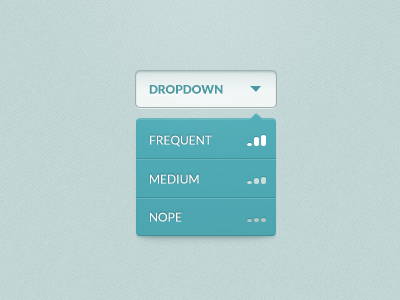
<style>
.page{position:relative;width:400px;height:300px}
.page>*{position:absolute;margin:0}
.t1{font:12px "Lato-Black";color:#4a9aa2;text-transform:uppercase}
.t2{font:12px "Lato-Regular";color:#ffffff;text-transform:uppercase}
</style>
<div class="page">
<p class="t1" style="left:149px;top:85px;width:74px;height:9px">Dropdown</p>
<p class="t2" style="left:150px;top:135px;width:62px;height:12px">Frequent</p>
<p class="t2" style="left:150px;top:174px;width:49px;height:10px">Medium</p>
<p class="t2" style="left:150px;top:212px;width:32px;height:10px">Nope</p>
</div>
